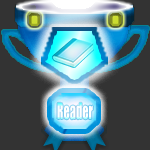
<style>
.page{position:relative;width:150px;height:150px;background:#333333}
.page>*{position:absolute;margin:0}
.t1{font:20.5px "Impact";color:#fefffe;scale:0.6 1}
</style>
<div class="page">
<p class="t1" style="left:57px;top:102px;width:36px;height:18px">Reader</p>
</div>
